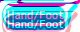
<style>
.page{position:relative;width:80px;height:32px}
.page>*{position:absolute;margin:0}
.t1{font:11px "JK-Gothic-M"}
</style>
<div class="page">
<p class="t1" style="left:7px;top:10px;width:57px;height:10px">Hand/Foot</p>
</div>
